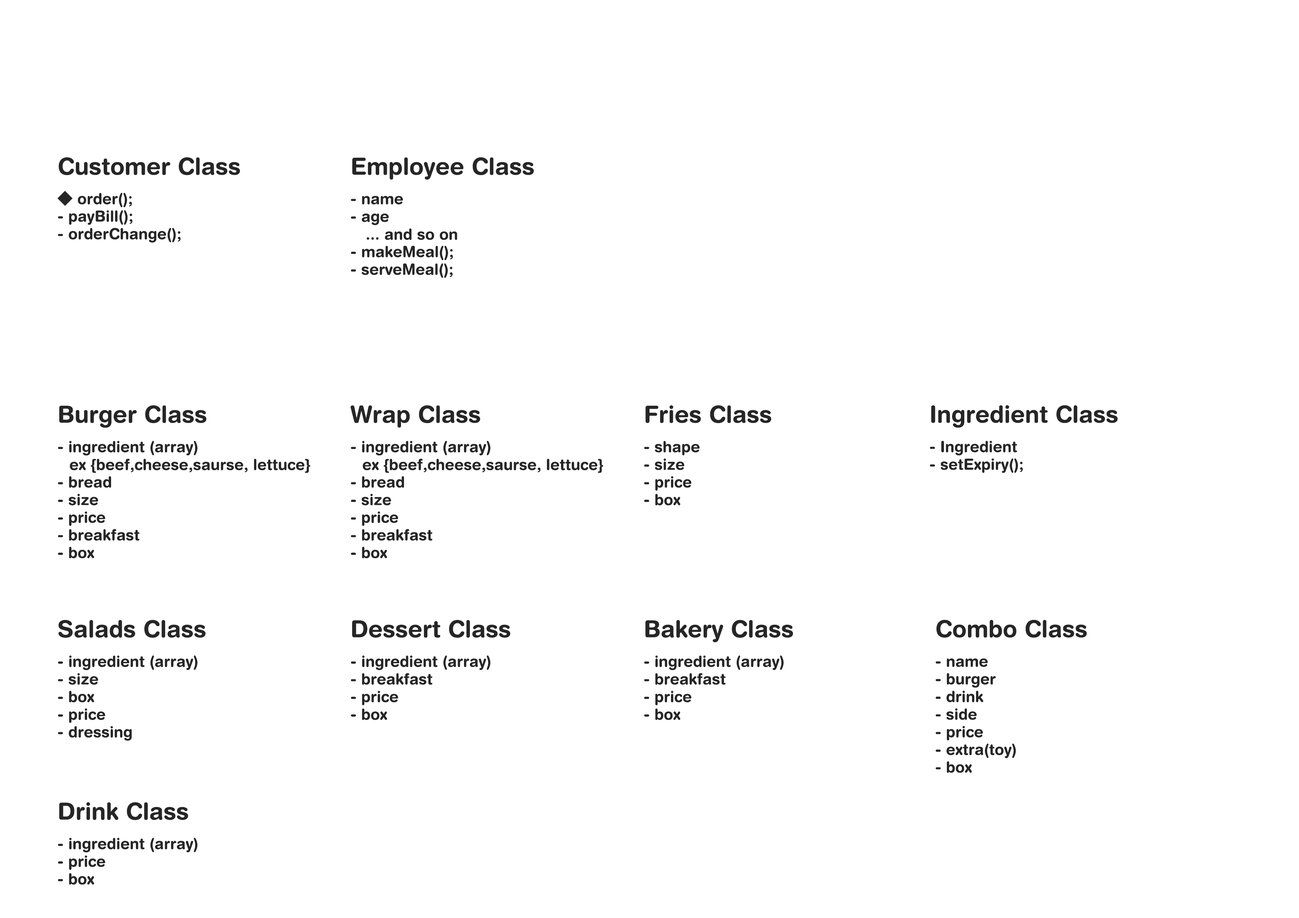
<style>
.page{position:relative;width:1299px;height:918px;background:#ffffff}
.page>*{position:absolute;margin:0}
.t1{font:23.5px "HelveticaRounded-Bold";color:#262626}
.t2{font:15.3px/17.6px "HelveticaRounded-Bold";color:#262626}
.t3{font:15.3px/17.6px "KozGoPr6N-Regular";color:#262626}
</style>
<div class="page">
<p class="t1" style="left:58px;top:157px;width:182px;height:18px">Customer Class</p>
<p class="t1" style="left:352px;top:157px;width:182px;height:23px">Employee Class</p>
<p class="t2" style="left:57px;top:191px;width:124px;height:52px"><span class="t3">◆</span> order();<br>- payBill();<br>- orderChange();</p>
<p class="t2" style="left:351px;top:196px;width:106px;height:82px">- name<br>- age<br>　... and so on<br>- makeMeal();<br>- serveMeal();</p>
<p class="t1" style="left:59px;top:405px;width:148px;height:23px">Burger Class</p>
<p class="t1" style="left:350px;top:405px;width:130px;height:23px">Wrap Class</p>
<p class="t1" style="left:645px;top:405px;width:126px;height:18px">Fries Class</p>
<p class="t1" style="left:931px;top:405px;width:187px;height:23px">Ingredient Class</p>
<p class="t2" style="left:58px;top:441px;width:252px;height:117px">- ingredient (array) <br>　ex {beef,cheese,saurse, lettuce}<br>- bread<br>- size<br>- price<br>- breakfast<br>- box</p>
<p class="t2" style="left:351px;top:441px;width:252px;height:117px">- ingredient (array) <br>　ex {beef,cheese,saurse, lettuce}<br>- bread<br>- size<br>- price<br>- breakfast<br>- box</p>
<p class="t2" style="left:644px;top:441px;width:56px;height:65px">- shape<br>- size<br>- price<br>- box</p>
<p class="t2" style="left:930px;top:441px;width:93px;height:32px">- Ingredient<br>- setExpiry();</p>
<p class="t1" style="left:58px;top:620px;width:147px;height:18px">Salads Class</p>
<p class="t1" style="left:352px;top:620px;width:158px;height:18px">Dessert Class</p>
<p class="t1" style="left:645px;top:620px;width:148px;height:22px">Bakery Class</p>
<p class="t1" style="left:936px;top:620px;width:151px;height:18px">Combo Class</p>
<p class="t2" style="left:58px;top:655px;width:140px;height:86px">- ingredient (array) <br>- size<br>- box<br>- price<br>- dressing</p>
<p class="t2" style="left:351px;top:655px;width:140px;height:65px">- ingredient (array) <br>- breakfast<br>- price<br>- box</p>
<p class="t2" style="left:644px;top:655px;width:140px;height:65px">- ingredient (array) <br>- breakfast<br>- price<br>- box</p>
<p class="t2" style="left:935px;top:658px;width:81px;height:115px">- name<br>- burger<br>- drink<br>- side<br>- price<br>- extra(toy)<br>- box</p>
<p class="t1" style="left:59px;top:802px;width:129px;height:18px">Drink Class</p>
<p class="t2" style="left:58px;top:838px;width:140px;height:47px">- ingredient (array) <br>- price<br>- box</p>
</div>
